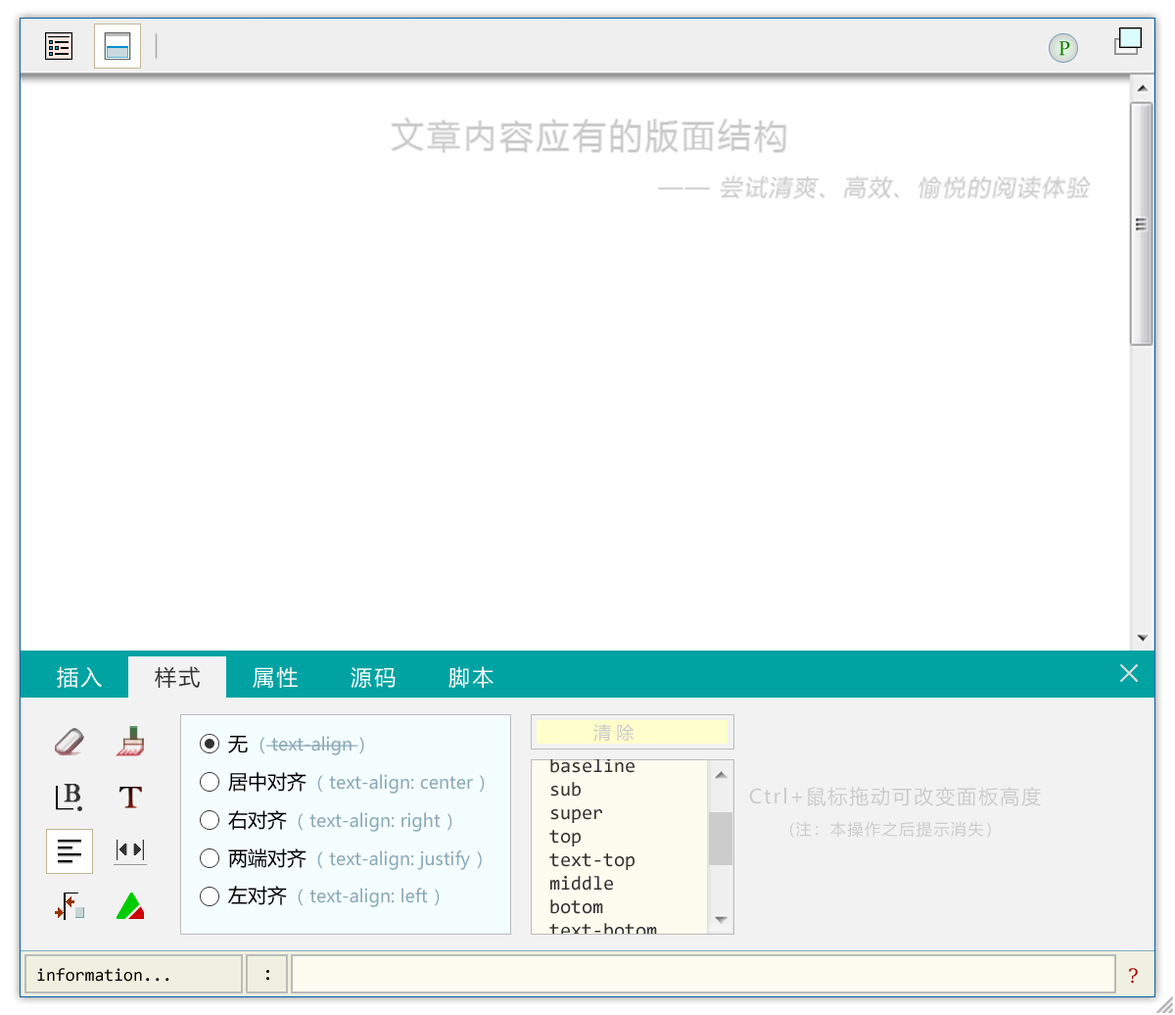
<style>
.page{position:relative;width:1175px;height:1015px;background:#ffffff}
.page>*{position:absolute;margin:0}
.t1{font:19.6px "Constantia";color:#1b7802}
.t2{font:21.5px "MicrosoftYaHei";letter-spacing:0.1em;color:#ffffff}
.t3{font:21.5px "MicrosoftYaHei";letter-spacing:0.1em;color:#333333}
.t4{font:27.4px "NSimSun";letter-spacing:0.1em;color:#dddddd;font-weight:bold}
.t5{font:17.6px "MicrosoftYaHei";color:#cccccc}
.t6{font:19.6px "MicrosoftYaHei";color:#000000}
.t7{font:17.6px "MicrosoftYaHei";color:#8baab9}
.t8{font:19.6px/23.5px "Consolas";color:#333333}
.t9{font:25.5px "MS Serif";letter-spacing:0.1em;color:#333333;font-weight:bold}
.t10{font:19.6px "MicrosoftYaHei";letter-spacing:0.1em;color:#cccccc}
.t11{font:15.7px "MicrosoftYaHei";letter-spacing:0.1em;color:#cccccc}
.t12{font:17.6px "Consolas";color:#000000}
.t13{font:19.6px "Consolas";color:#000000}
.t14{font:19.6px "DejaVuSerif";color:#aa0000}
</style>
<div class="page">
<p class="t1" style="left:1060px;top:41px;width:10px;height:15px">P</p>
<p class="t2" style="left:57px;top:666px;width:45px;height:22px">插入</p>
<p class="t3" style="left:155px;top:666px;width:45px;height:22px">样式</p>
<p class="t2" style="left:449px;top:666px;width:45px;height:22px">脚本</p>
<p class="t4" style="left:1120px;top:664px;width:19px;height:18px">×</p>
<p class="t2" style="left:253px;top:667px;width:45px;height:21px">属性</p>
<p class="t2" style="left:351px;top:667px;width:45px;height:21px">源码</p>
<p class="t5" style="left:593px;top:723px;width:42px;height:18px">清 除</p>
<p class="t6" style="left:228px;top:736px;width:20px;height:17px">无</p>
<p class="t7" style="left:260px;top:736px;width:104px;height:19px">（ text-align ）</p>
<p class="t8" style="left:549px;top:758px;width:108px;height:179px">baseline<br>sub<br>super<br>top<br>text-top<br>middle<br>botom<br>text-botom</p>
<p class="t6" style="left:228px;top:772px;width:79px;height:19px">居中对齐</p>
<p class="t7" style="left:317px;top:774px;width:168px;height:19px">（ text-align: center ）</p>
<p class="t9" style="left:64px;top:783px;width:16px;height:19px">B</p>
<p class="t10" style="left:749px;top:786px;width:292px;height:51px;text-align:center">Ctrl+鼠标拖动可改变面板高度<br><span class="t11">(注：本操作之后提示消失）</span></p>
<p class="t6" style="left:228px;top:810px;width:59px;height:20px">右对齐</p>
<p class="t7" style="left:298px;top:812px;width:154px;height:19px">（ text-align: right ）</p>
<p class="t6" style="left:228px;top:848px;width:79px;height:20px">两端对齐</p>
<p class="t7" style="left:317px;top:850px;width:165px;height:20px">（ text-align: justify ）</p>
<p class="t6" style="left:228px;top:885px;width:59px;height:20px">左对齐</p>
<p class="t7" style="left:298px;top:887px;width:142px;height:20px">（ text-align: left ）</p>
<p class="t12" style="left:37px;top:968px;width:132px;height:13px">information...</p>
<p class="t13" style="left:266px;top:970px;width:3px;height:10px">:</p>
<p class="t14" style="left:1129px;top:968px;width:9px;height:15px">?</p>
</div>
